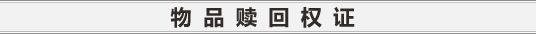
<style>
.page{position:relative;width:536px;height:34px;background:#f2f2f2}
.page>*{position:absolute;margin:0}
.t1{font:21.3px "MicrosoftYaHei-Bold";color:#312c29}
</style>
<div class="page">
<p class="t1" style="left:170px;top:7px;width:185px;height:21px">物品赎回权证</p>
</div>
